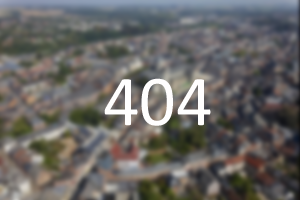
<style>
.page{position:relative;width:300px;height:200px}
.page>*{position:absolute;margin:0}
.t1{font:72px "Calibri";color:#fffefe}
</style>
<div class="page">
<p class="t1" style="left:104px;top:78px;width:107px;height:48px">404</p>
</div>
